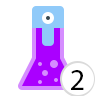
<style>
.page{position:relative;width:96px;height:96px;background:#ffffff}
.page>*{position:absolute;margin:0}
.t1{font:30px "MyriadPro-Regular";color:#000000}
</style>
<div class="page">
<p class="t1" style="left:71px;top:70px;width:13px;height:20px">2</p>
</div>
